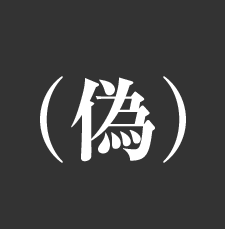
<style>
.page{position:relative;width:225px;height:229px;background:#333333}
.page>*{position:absolute;margin:0}
.t1{font:90px "RyuminPr6N-ExBold";color:#ffffff}
</style>
<div class="page">
<p class="t1" style="left:40px;top:76px;width:146px;height:87px">（偽）</p>
</div>
